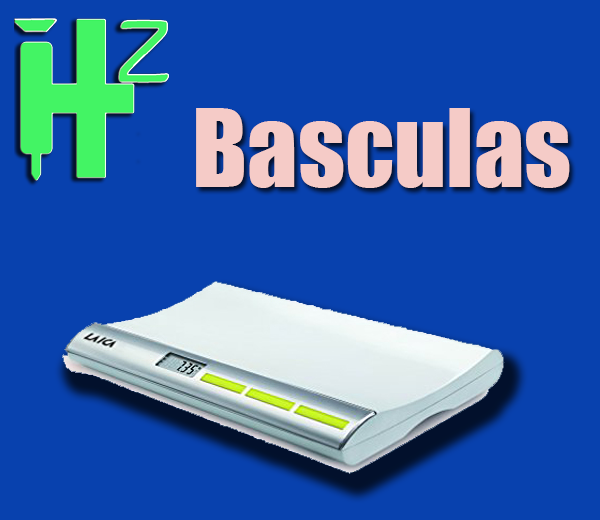
<style>
.page{position:relative;width:600px;height:520px;background:#0841ae}
.page>*{position:absolute;margin:0}
.t1{font:100px "Impact";color:#f5cbc7}
</style>
<div class="page">
<p class="t1" style="left:196px;top:108px;width:374px;height:80px">Basculas</p>
</div>
